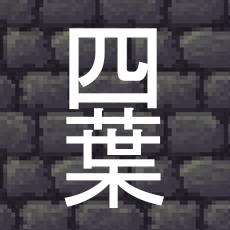
<style>
.page{position:relative;width:230px;height:230px}
.page>*{position:absolute;margin:0}
.t1{font:111.1px "MS-PGothic";color:#ffffff}
</style>
<div class="page">
<p class="t1" style="left:69px;top:28px;width:88px;height:82px">四</p>
<p class="t1" style="left:64px;top:107px;width:100px;height:101px">葉</p>
</div>
